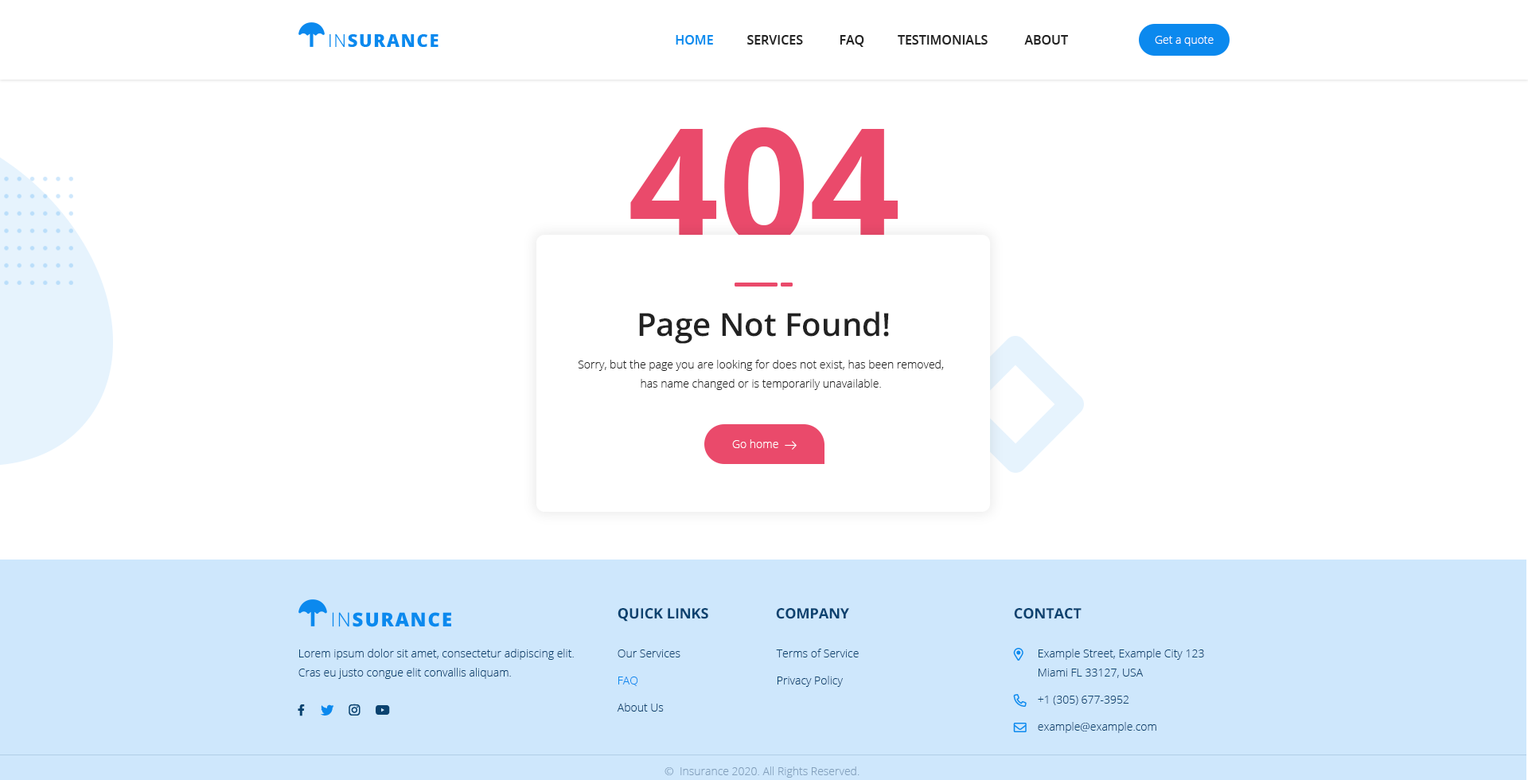
<style>
.page{position:relative;width:1528px;height:780px;background:#ffffff}
.page>*{position:absolute;margin:0}
.t1{font:17.5px "OpenSans-Extrabold";letter-spacing:0.075em;color:#0b89ee;text-transform:uppercase}
.t2{font:17.5px "OpenSans-Light";letter-spacing:0.075em;color:#0b89ee;text-transform:uppercase}
.t3{font:12.7px "OpenSans-Semibold";color:#0b89ee;text-transform:uppercase}
.t4{font:12.7px "OpenSans-Semibold";color:#232323;text-transform:uppercase}
.t5{font:12.7px "OpenSans-Semibold";color:#232323}
.t6{font:11.1px "OpenSans-Light";color:#ffffff}
.t7{font:159.2px "OpenSans-Bold";color:#ea4a6b}
.t8{font:31.8px "OpenSans-SemiBold";color:#222222}
.t9{font:11.1px/19.1px "OpenSans-Light";color:#222222}
.t10{font:19.2px "OpenSans-Extrabold";letter-spacing:0.075em;color:#0b89ee;text-transform:uppercase}
.t11{font:19.2px "OpenSans-Light";letter-spacing:0.075em;color:#0b89ee;text-transform:uppercase}
.t12{font:14.3px "OpenSans-Bold";color:#0a426f;text-transform:uppercase}
.t13{font:11.1px/19.1px "OpenSans-Light";color:#0a426f}
.t14{font:11.1px/19.1px "OpenSans-Light";color:#0b89ee}
.t15{font:11.1px "OpenSans-Light";color:#83a0bc}
</style>
<div class="page">
<p class="t1" style="left:330px;top:34px;width:109px;height:13px"><span class="t2">In</span>surance</p>
<p class="t3" style="left:676px;top:35px;width:37px;height:10px">Home</p>
<p class="t4" style="left:748px;top:35px;width:55px;height:10px">Services</p>
<p class="t5" style="left:840px;top:35px;width:25px;height:12px">FAQ</p>
<p class="t4" style="left:898px;top:35px;width:90px;height:10px">Testimonials</p>
<p class="t4" style="left:1025px;top:35px;width:43px;height:10px">About</p>
<p class="t6" style="left:1155px;top:36px;width:59px;height:10px">Get a quote</p>
<p class="t7" style="left:630px;top:127px;width:269px;height:117px">404</p>
<p class="t8" style="left:639px;top:311px;width:250px;height:33px">Page Not Found!</p>
<p class="t9" style="left:578px;top:360px;width:366px;height:30px;text-align:center">Sorry, but the page you are looking for does not exist, has been removed, <br>has name changed or is temporarily unavailable.</p>
<p class="t6" style="left:732px;top:439px;width:47px;height:9px">Go home</p>
<p class="t10" style="left:332px;top:612px;width:119px;height:15px"><span class="t11">In</span>surance</p>
<p class="t12" style="left:618px;top:608px;width:91px;height:14px">Quick Links</p>
<p class="t12" style="left:776px;top:608px;width:73px;height:11px">Company</p>
<p class="t12" style="left:1014px;top:608px;width:68px;height:11px">CONTACT</p>
<p class="t13" style="left:299px;top:649px;width:275px;height:30px">Lorem ipsum dolor sit amet, consectetur adipiscing elit. Cras eu justo congue elit convallis aliquam.</p>
<p class="t13" style="left:617px;top:650px;width:64px;height:62px">Our Services<br><span class="t14">FAQ<br></span>About Us</p>
<p class="t13" style="left:776px;top:649px;width:83px;height:38px">Terms of Service<br>Privacy Policy</p>
<p class="t13" style="left:1038px;top:649px;width:166px;height:84px">Example Street, Example City 123<br>Miami FL 33127, USA<br>+1 (305) 677-3952<br>example@example.com</p>
<p class="t15" style="left:665px;top:767px;width:195px;height:11px">©  Insurance 2020. All Rights Reserved.</p>
</div>
